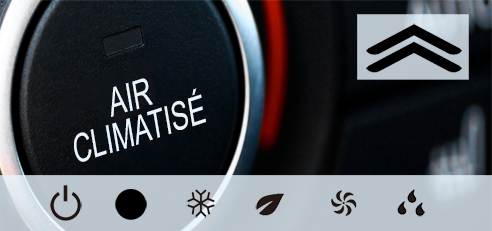
<style>
.page{position:relative;width:492px;height:231px}
.page>*{position:absolute;margin:0}
.t1{font:39px/33.9px "ArialNarrow";color:#e7f4fd;scale:0.84 1}
</style>
<div class="page">
<p class="t1" style="left:74px;top:78px;width:132px;height:84px;text-align:center;rotate:-18deg">AIR <br>CLIMATISÉ</p>
</div>
